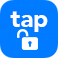
<style>
.page{position:relative;width:58px;height:58px;background:#007aff}
.page>*{position:absolute;margin:0}
.t1{font:24px "Avenir-Black";color:#ffffff}
</style>
<div class="page">
<p class="t1" style="left:10px;top:11px;width:38px;height:21px">tap</p>
</div>
